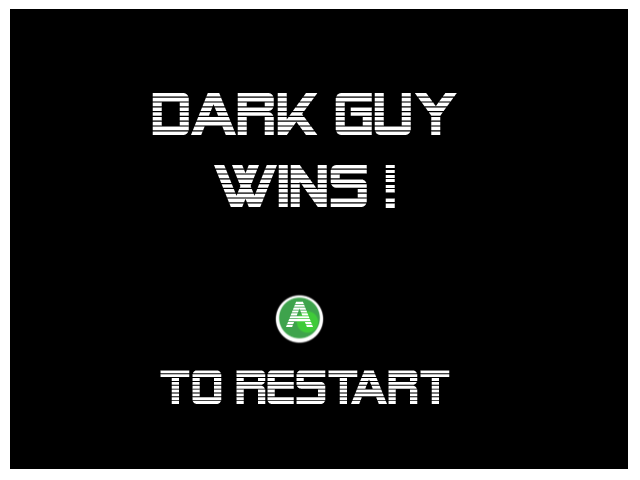
<style>
.page{position:relative;width:640px;height:480px;background:#000000}
.page>*{position:absolute;margin:0}
.t1{font:60px "AlienEncounters";color:#ffffff}
.t2{font:48px "AlienEncounters";color:#ffffff}
</style>
<div class="page">
<p class="t1" style="left:152px;top:93px;width:305px;height:115px;text-align:center">Dark guy<br>wins !</p>
<p class="t2" style="left:160px;top:370px;width:290px;height:34px">to restart</p>
</div>
